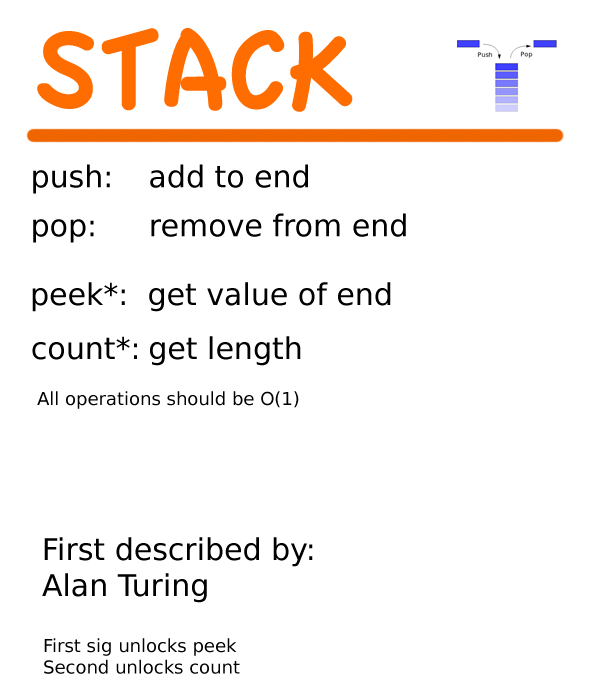
<style>
.page{position:relative;width:600px;height:700px;background:#ffffff}
.page>*{position:absolute;margin:0}
.t1{font:120px "AppleCasual";color:#ff6c00}
.t2{font:30px "BitstreamVeraSans-Roman";color:#000000}
.t3{font:18px "BitstreamVeraSans-Roman";color:#000000}
</style>
<div class="page">
<p class="t1" style="left:37px;top:28px;width:316px;height:84px">STACK</p>
<p class="t2" style="left:33px;top:164px;width:275px;height:30px">push:    add to end</p>
<p class="t2" style="left:33px;top:213px;width:373px;height:30px">pop:      remove from end</p>
<p class="t2" style="left:32px;top:282px;width:359px;height:30px">peek*:  get value of end</p>
<p class="t2" style="left:32px;top:336px;width:269px;height:30px">count*: get length</p>
<p class="t3" style="left:37px;top:391px;width:262px;height:18px">All operations should be O(1)</p>
<p class="t2" style="left:42px;top:537px;width:271px;height:66px">First described by:<br>Alan Turing</p>
<p class="t3" style="left:44px;top:638px;width:196px;height:36px">First sig unlocks peek<br>Second unlocks count</p>
</div>
